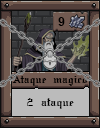
<style>
.page{position:relative;width:100px;height:128px}
.page>*{position:absolute;margin:0}
.t1{font:12px "Arial-BoldMT";color:#000000}
.t2{font:9.6px "SWGothe";color:#000000}
.t3{font:10px "SWGothe";color:#000000}
</style>
<div class="page">
<p class="t1" style="left:58px;top:17px;width:7px;height:9px">9</p>
<p class="t2" style="left:12px;top:76px;width:76px;height:10px">Ataque magico</p>
<p class="t3" style="left:27px;top:98px;width:47px;height:11px">2 ataque</p>
</div>
